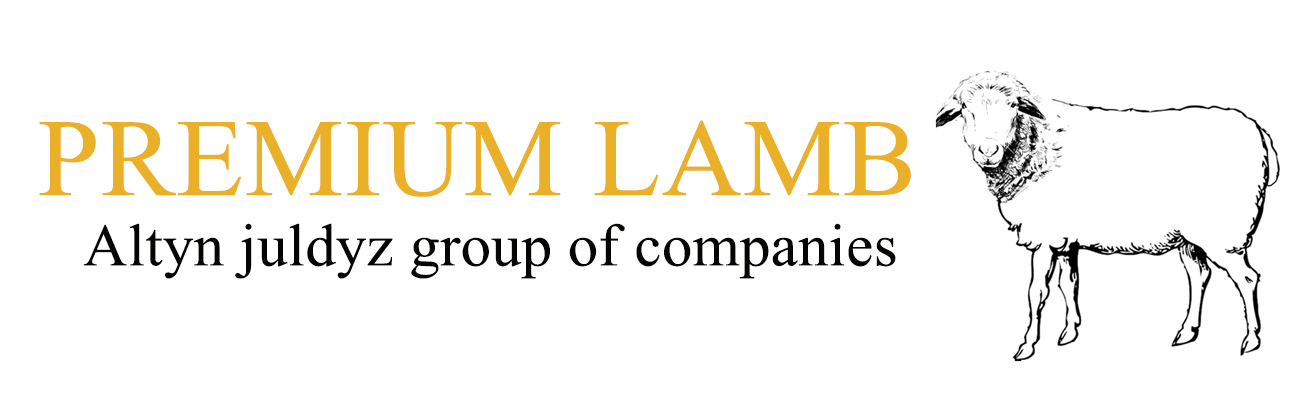
<style>
.page{position:relative;width:1298px;height:410px;background:#ffffff}
.page>*{position:absolute;margin:0}
.t1{font:110px "TimesNewRomanPSMT";letter-spacing:0.009em;color:#e9b028}
.t2{font:60px "TimesNewRomanPSMT";letter-spacing:0.009em;color:#060503}
</style>
<div class="page">
<p class="t1" style="left:39px;top:120px;width:872px;height:77px">PREMIUM LAMB</p>
<p class="t2" style="left:83px;top:223px;width:813px;height:56px">Altyn juldyz group of companies</p>
</div>
